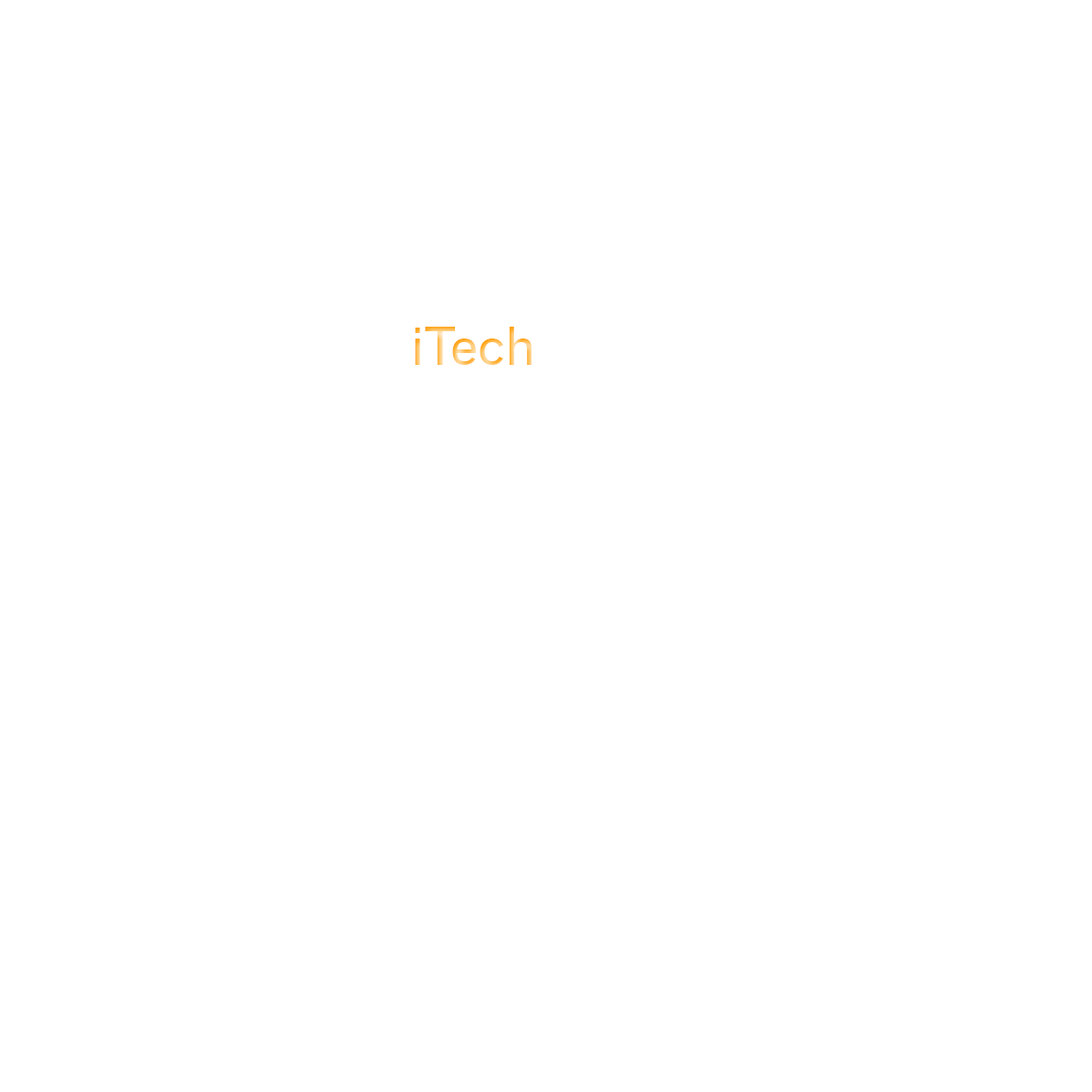
<style>
.page{position:relative;width:1092px;height:1092px;background:#ffffff}
.page>*{position:absolute;margin:0}
.t1{font:52.5px "UVNGioMay"}
</style>
<div class="page">
<p class="t1" style="left:415px;top:327px;width:116px;height:38px">iTech</p>
</div>
